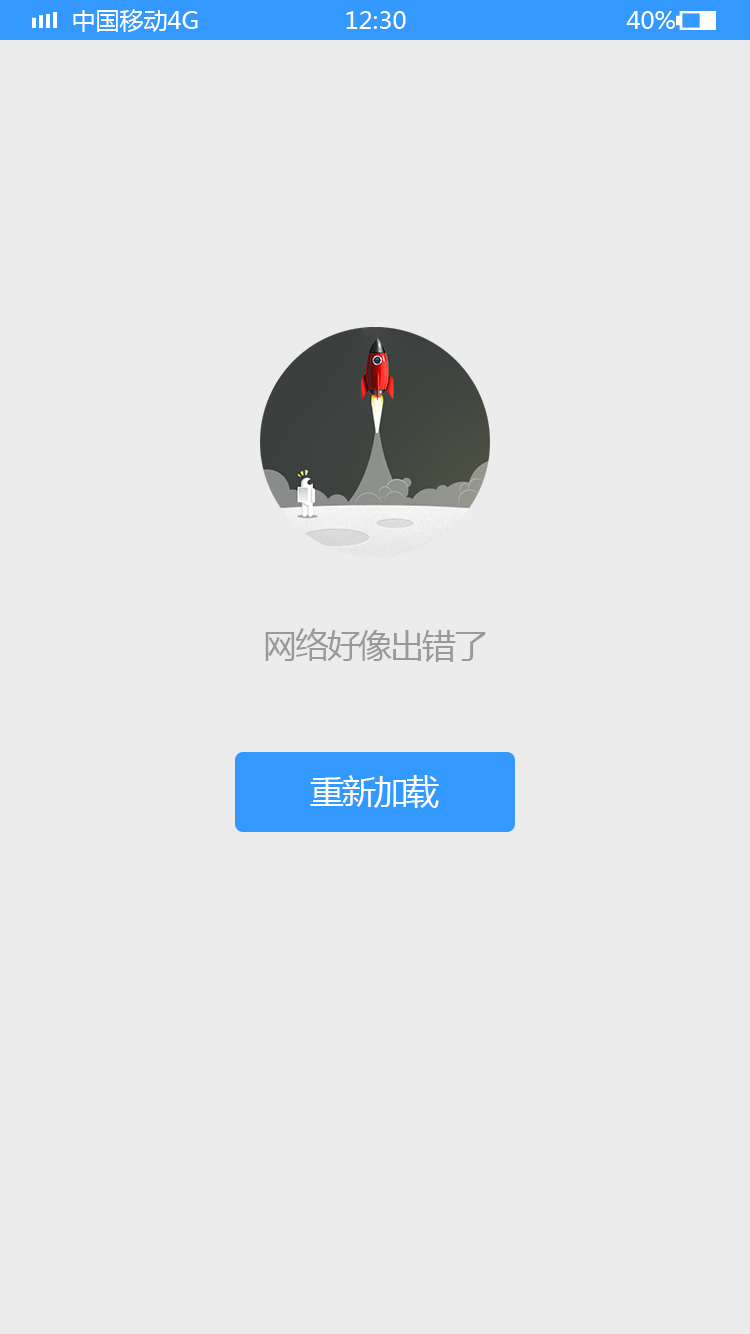
<style>
.page{position:relative;width:750px;height:1334px;background:#ececec}
.page>*{position:absolute;margin:0}
.t1{font:24px "MicrosoftYaHei";color:#ffffff;text-transform:uppercase}
.t2{font:34px "MicrosoftYaHei";letter-spacing:-0.06em;color:#999999}
.t3{font:34px "MicrosoftYaHei";letter-spacing:-0.06em;color:#ffffff}
</style>
<div class="page">
<p class="t1" style="left:73px;top:9px;width:125px;height:23px">中国移动4G</p>
<p class="t1" style="left:346px;top:11px;width:60px;height:18px">12:30</p>
<p class="t1" style="left:626px;top:11px;width:49px;height:18px">40%</p>
<p class="t2" style="left:265px;top:628px;width:221px;height:34px">网络好像出错了</p>
<p class="t3" style="left:310px;top:775px;width:129px;height:33px">重新加载</p>
</div>
